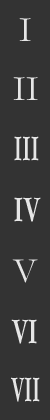
<style>
.page{position:relative;width:50px;height:420px;background:#333333}
.page>*{position:absolute;margin:0}
.t1{font:36px "Garamond";color:#e6e6e6}
.t2{font:36px "Garamond-Bold";color:#e6e6e6;scale:0.59 1}
.t3{font:36px "Garamond-Bold";color:#e6e6e6;scale:0.7 1}
.t4{font:36px "Garamond-Bold";color:#e6e6e6;scale:0.67 1}
.t5{font:36px "Garamond-Bold";color:#e6e6e6;scale:0.55 1}
</style>
<div class="page">
<p class="t1" style="left:19px;top:18px;width:12px;height:23px">I</p>
<p class="t1" style="left:13px;top:77px;width:25px;height:23px">II</p>
<p class="t2" style="left:14px;top:136px;width:25px;height:25px">III</p>
<p class="t3" style="left:14px;top:197px;width:27px;height:25px">IV</p>
<p class="t1" style="left:12px;top:259px;width:26px;height:24px">V</p>
<p class="t4" style="left:11px;top:319px;width:26px;height:25px">VI</p>
<p class="t5" style="left:11px;top:377px;width:29px;height:25px">VII</p>
</div>
